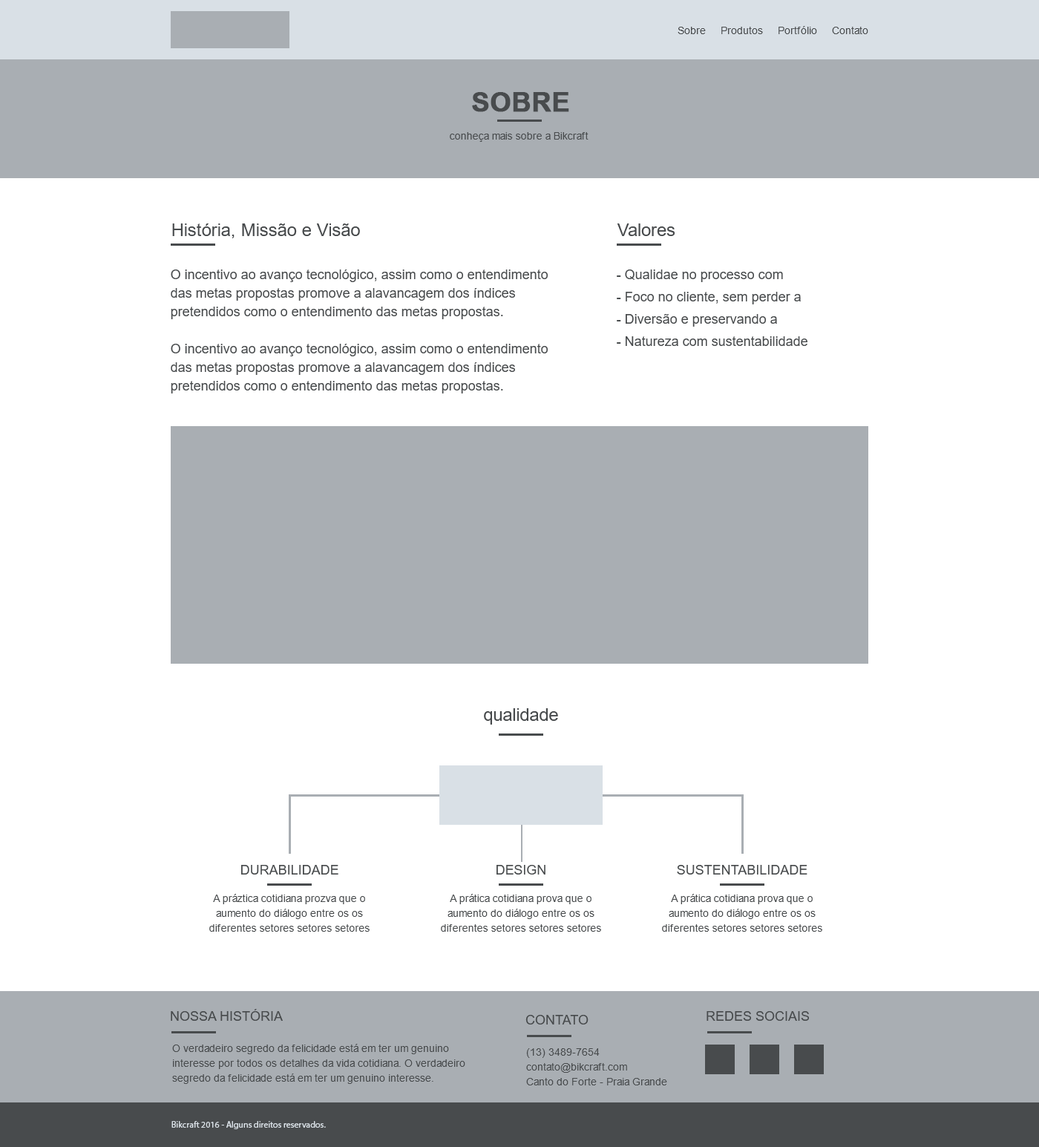
<style>
.page{position:relative;width:1039px;height:1147px;background:#ffffff}
.page>*{position:absolute;margin:0}
.t1{font:10.4px "ArialMT";color:#484b4d}
.t2{font:26.7px "Arial-BoldMT";color:#484b4d;text-transform:uppercase;font-weight:bold}
.t3{font:17.8px "ArialMT";color:#484b4d}
.t4{font:13.4px/18.6px "ArialMT";color:#484b4d}
.t5{font:13.4px/22.3px "ArialMT";color:#484b4d}
.t6{font:13.4px "ArialMT";color:#484b4d}
.t7{font:10.4px/14.8px "ArialMT";color:#484b4d}
.t8{font:13.4px "ArialMT";color:#484b4d;text-transform:uppercase}
.t9{font:8.9px "MyriadPro-Regular";color:#d9e0e6}
</style>
<div class="page">
<p class="t1" style="left:678px;top:26px;width:191px;height:8px">Sobre     Produtos     Portfólio     Contato</p>
<p class="t2" style="left:472px;top:92px;width:97px;height:20px">SOBRE</p>
<p class="t1" style="left:450px;top:132px;width:139px;height:10px">conheça mais sobre a Bikcraft</p>
<p class="t3" style="left:172px;top:223px;width:188px;height:15px">História, Missão e Visão</p>
<p class="t3" style="left:617px;top:223px;width:58px;height:13px">Valores</p>
<p class="t4" style="left:171px;top:270px;width:377px;height:124px">O incentivo ao avanço tecnológico, assim como o entendimento das metas propostas promove a alavancagem dos índices pretendidos como o entendimento das metas propostas.<br><br>O incentivo ao avanço tecnológico, assim como o entendimento das metas propostas promove a alavancagem dos índices pretendidos como o entendimento das metas propostas.</p>
<p class="t5" style="left:617px;top:270px;width:191px;height:76px">- Qualidae no processo com<br>- Foco no cliente, sem perder a<br>- Diversão e preservando a<br>- Natureza com sustentabilidade</p>
<p class="t3" style="left:484px;top:708px;width:74px;height:17px">qualidade</p>
<p class="t6" style="left:241px;top:865px;width:98px;height:10px">DURABILIDADE</p>
<p class="t6" style="left:497px;top:865px;width:49px;height:10px">DESIGN</p>
<p class="t6" style="left:677px;top:865px;width:131px;height:10px">SUSTENTABILIDADE</p>
<p class="t7" style="left:209px;top:894px;width:161px;height:38px;text-align:center">A práztica cotidiana prozva que o aumento do diálogo entre os os diferentes setores setores setores</p>
<p class="t7" style="left:441px;top:894px;width:160px;height:38px;text-align:center">A prática cotidiana prova que o aumento do diálogo entre os os diferentes setores setores setores</p>
<p class="t7" style="left:662px;top:894px;width:161px;height:38px;text-align:center">A prática cotidiana prova que o aumento do diálogo entre os os diferentes setores setores setores</p>
<p class="t8" style="left:171px;top:1009px;width:112px;height:12px">Nossa História</p>
<p class="t8" style="left:707px;top:1011px;width:102px;height:10px">redes sociais</p>
<p class="t8" style="left:526px;top:1015px;width:63px;height:10px">Contato</p>
<p class="t7" style="left:172px;top:1044px;width:294px;height:40px">O verdadeiro segredo da felicidade está em ter um genuino<br>interesse por todos os detalhes da vida cotidiana. O verdadeiro segredo da felicidade está em ter um genuino interesse.</p>
<p class="t7" style="left:526px;top:1048px;width:141px;height:38px">(13) 3489-7654<br>contato@bikcraft.com<br>Canto do Forte - Praia Grande</p>
<p class="t9" style="left:172px;top:1121px;width:154px;height:8px">Bikcraft 2016 - Alguns direitos reservados.</p>
</div>
